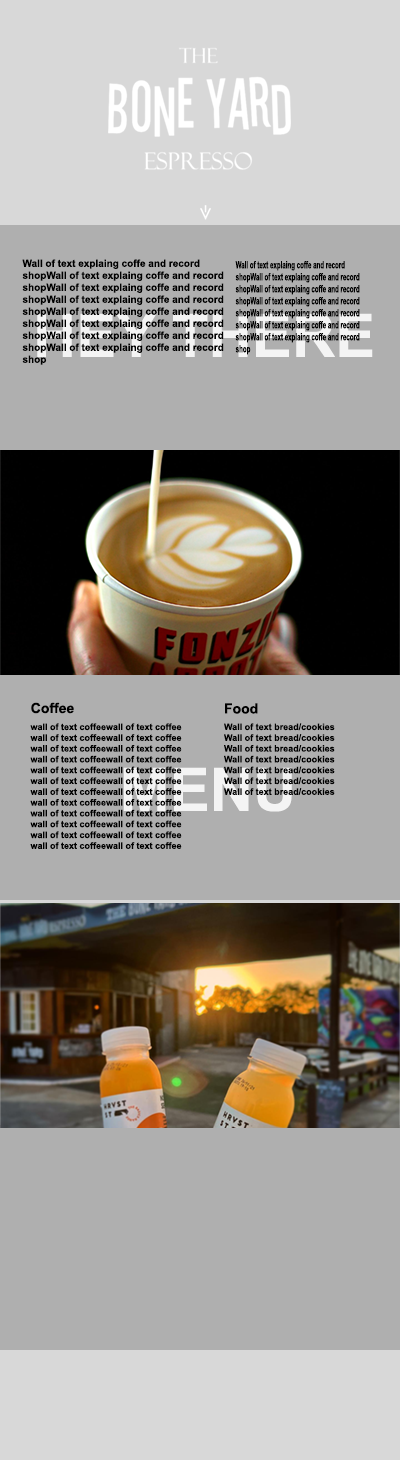
<style>
.page{position:relative;width:400px;height:1460px;background:#afafaf}
.page>*{position:absolute;margin:0}
.t1{font:10px "Arial-BoldMT";color:#000000}
.t2{font:10px "Arial-BoldMT";color:#000000;scale:0.62 1}
.t3{font:14px "Arial-BoldMT";color:#000000}
.t4{font:9px "Arial-BoldMT";color:#000000}
.t5{font:60px "Arial-BoldMT";color:#f4f4f4}
</style>
<div class="page">
<p class="t1" style="left:22px;top:259px;width:202px;height:106px">Wall of text explaing coffe and record <br>shopWall of text explaing coffe and record <br>shopWall of text explaing coffe and record <br>shopWall of text explaing coffe and record <br>shopWall of text explaing coffe and record <br>shopWall of text explaing coffe and record <br>shopWall of text explaing coffe and record <br>shopWall of text explaing coffe and record <br>shop</p>
<p class="t2" style="left:235px;top:261px;width:125px;height:94px">Wall of text explaing coffe and record <br>shopWall of text explaing coffe and record <br>shopWall of text explaing coffe and record <br>shopWall of text explaing coffe and record <br>shopWall of text explaing coffe and record <br>shopWall of text explaing coffe and record <br>shopWall of text explaing coffe and record <br>shop</p>
<p class="t3" style="left:31px;top:702px;width:43px;height:12px">Coffee</p>
<p class="t3" style="left:225px;top:703px;width:33px;height:11px">Food</p>
<p class="t4" style="left:30px;top:723px;width:152px;height:126px">wall of text coffeewall of text coffee<br>wall of text coffeewall of text coffee<br>wall of text coffeewall of text coffee<br>wall of text coffeewall of text coffee<br>wall of text coffeewall of text coffee<br>wall of text coffeewall of text coffee<br>wall of text coffeewall of text coffee<br>wall of text coffeewall of text coffee<br>wall of text coffeewall of text coffee<br>wall of text coffeewall of text coffee<br>wall of text coffeewall of text coffee<br>wall of text coffeewall of text coffee</p>
<p class="t4" style="left:224px;top:723px;width:111px;height:72px">Wall of text bread/cookies<br>Wall of text bread/cookies<br>Wall of text bread/cookies<br>Wall of text bread/cookies<br>Wall of text bread/cookies<br>Wall of text bread/cookies<br>Wall of text bread/cookies</p>
<p class="t5" style="left:123px;top:767px;width:169px;height:45px">MENU</p>
</div>
